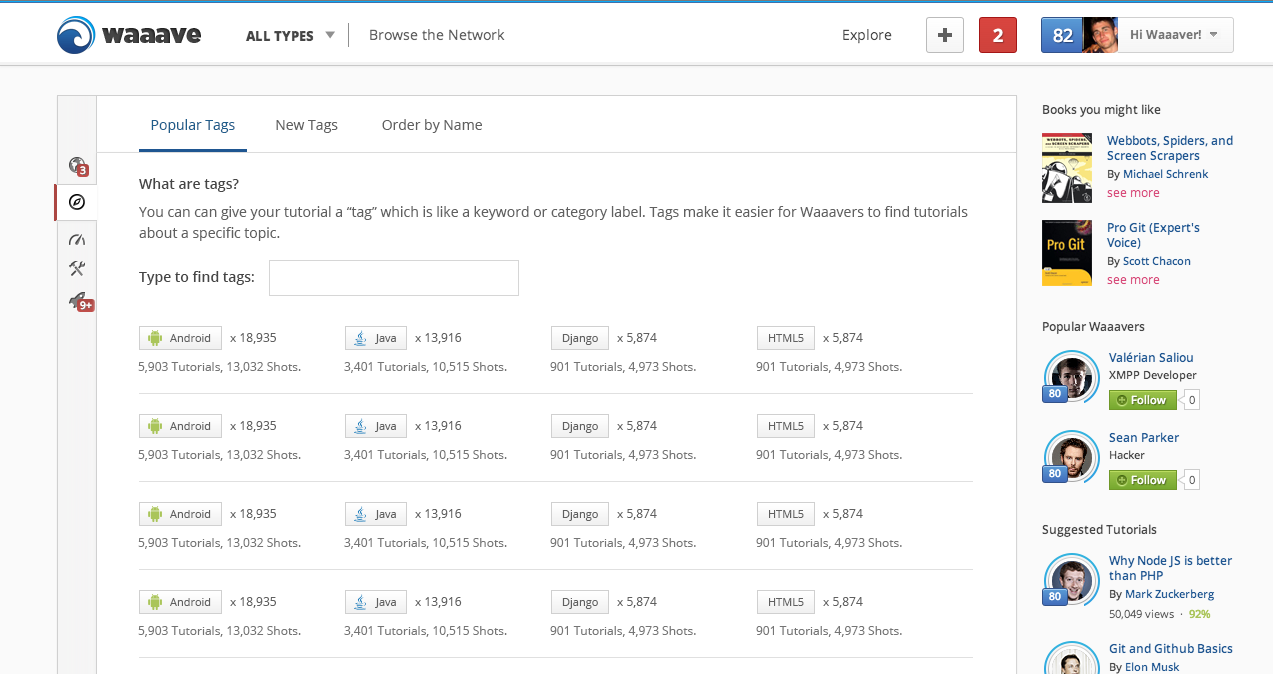
<style>
.page{position:relative;width:1273px;height:674px;background:#ffffff}
.page>*{position:absolute;margin:0}
.t1{font:14px "OpenSans";color:#606060}
.t2{font:14px "OpenSans";color:#205d8b}
.t3{font:14px "OpenSans-Semibold";color:#454545}
.t4{font:14px/21px "OpenSans";color:#606060}
.t5{font:14px "OpenSans";color:#454545}
.t6{font:11px "OpenSans";color:#606060}
.t7{font:12px "OpenSans";color:#606060}
.t8{font:12px "OpenSans";color:#757575}
</style>
<div class="page">
<p class="t1" style="left:151px;top:119px;width:331px;height:14px"><span class="t2">Popular Tags</span>           New Tags            Order by Name</p>
<p class="t3" style="left:139px;top:178px;width:100px;height:14px">What are tags?</p>
<p class="t4" style="left:139px;top:206px;width:829px;height:35px">You can can give your tutorial a “tag” which is like a keyword or category label. Tags make it easier for Waaavers to find tutorials<br>about a specific topic.</p>
<p class="t3" style="left:139px;top:271px;width:115px;height:14px">Type to find tags<span class="t5">:</span></p>
<p class="t6" style="left:170px;top:334px;width:41px;height:8px">Android</p>
<p class="t7" style="left:230px;top:333px;width:46px;height:11px">x 18,935</p>
<p class="t6" style="left:375px;top:334px;width:21px;height:10px">Java</p>
<p class="t7" style="left:415px;top:333px;width:47px;height:11px">x 13,916</p>
<p class="t6" style="left:562px;top:334px;width:36px;height:11px">Django</p>
<p class="t7" style="left:617px;top:333px;width:40px;height:11px">x 5,874</p>
<p class="t6" style="left:769px;top:334px;width:35px;height:8px">HTML5</p>
<p class="t7" style="left:823px;top:333px;width:40px;height:11px">x 5,874</p>
<p class="t8" style="left:138px;top:362px;width:163px;height:11px">5,903 Tutorials, 13,032 Shots.</p>
<p class="t8" style="left:344px;top:362px;width:163px;height:11px">3,401 Tutorials, 10,515 Shots.</p>
<p class="t8" style="left:550px;top:362px;width:146px;height:11px">901 Tutorials, 4,973 Shots.</p>
<p class="t8" style="left:756px;top:362px;width:146px;height:11px">901 Tutorials, 4,973 Shots.</p>
<p class="t6" style="left:170px;top:422px;width:41px;height:8px">Android</p>
<p class="t7" style="left:230px;top:421px;width:46px;height:11px">x 18,935</p>
<p class="t6" style="left:375px;top:422px;width:21px;height:10px">Java</p>
<p class="t7" style="left:415px;top:421px;width:47px;height:11px">x 13,916</p>
<p class="t6" style="left:562px;top:422px;width:36px;height:11px">Django</p>
<p class="t7" style="left:617px;top:421px;width:40px;height:11px">x 5,874</p>
<p class="t6" style="left:769px;top:422px;width:35px;height:8px">HTML5</p>
<p class="t7" style="left:823px;top:421px;width:40px;height:11px">x 5,874</p>
<p class="t8" style="left:138px;top:450px;width:163px;height:11px">5,903 Tutorials, 13,032 Shots.</p>
<p class="t8" style="left:344px;top:450px;width:163px;height:11px">3,401 Tutorials, 10,515 Shots.</p>
<p class="t8" style="left:550px;top:450px;width:146px;height:11px">901 Tutorials, 4,973 Shots.</p>
<p class="t8" style="left:756px;top:450px;width:146px;height:11px">901 Tutorials, 4,973 Shots.</p>
<p class="t6" style="left:170px;top:510px;width:41px;height:8px">Android</p>
<p class="t7" style="left:230px;top:509px;width:46px;height:11px">x 18,935</p>
<p class="t6" style="left:375px;top:510px;width:21px;height:10px">Java</p>
<p class="t7" style="left:415px;top:509px;width:47px;height:11px">x 13,916</p>
<p class="t6" style="left:562px;top:510px;width:36px;height:11px">Django</p>
<p class="t7" style="left:617px;top:509px;width:40px;height:11px">x 5,874</p>
<p class="t6" style="left:769px;top:510px;width:35px;height:8px">HTML5</p>
<p class="t7" style="left:823px;top:509px;width:40px;height:11px">x 5,874</p>
<p class="t8" style="left:138px;top:538px;width:163px;height:11px">5,903 Tutorials, 13,032 Shots.</p>
<p class="t8" style="left:344px;top:538px;width:163px;height:11px">3,401 Tutorials, 10,515 Shots.</p>
<p class="t8" style="left:550px;top:538px;width:146px;height:11px">901 Tutorials, 4,973 Shots.</p>
<p class="t8" style="left:756px;top:538px;width:146px;height:11px">901 Tutorials, 4,973 Shots.</p>
<p class="t6" style="left:170px;top:598px;width:41px;height:8px">Android</p>
<p class="t7" style="left:230px;top:597px;width:46px;height:11px">x 18,935</p>
<p class="t6" style="left:375px;top:598px;width:21px;height:10px">Java</p>
<p class="t7" style="left:415px;top:597px;width:47px;height:11px">x 13,916</p>
<p class="t6" style="left:562px;top:598px;width:36px;height:11px">Django</p>
<p class="t7" style="left:617px;top:597px;width:40px;height:11px">x 5,874</p>
<p class="t6" style="left:769px;top:598px;width:35px;height:8px">HTML5</p>
<p class="t7" style="left:823px;top:597px;width:40px;height:11px">x 5,874</p>
<p class="t8" style="left:138px;top:626px;width:163px;height:11px">5,903 Tutorials, 13,032 Shots.</p>
<p class="t8" style="left:344px;top:626px;width:163px;height:11px">3,401 Tutorials, 10,515 Shots.</p>
<p class="t8" style="left:550px;top:626px;width:146px;height:11px">901 Tutorials, 4,973 Shots.</p>
<p class="t8" style="left:756px;top:626px;width:146px;height:11px">901 Tutorials, 4,973 Shots.</p>
</div>
